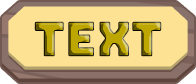
<style>
.page{position:relative;width:196px;height:84px;background:#fde294}
.page>*{position:absolute;margin:0}
.t1{font:48px "Bungee-Regular"}
</style>
<div class="page">
<p class="t1" style="left:34px;top:21px;width:128px;height:36px">text</p>
</div>
